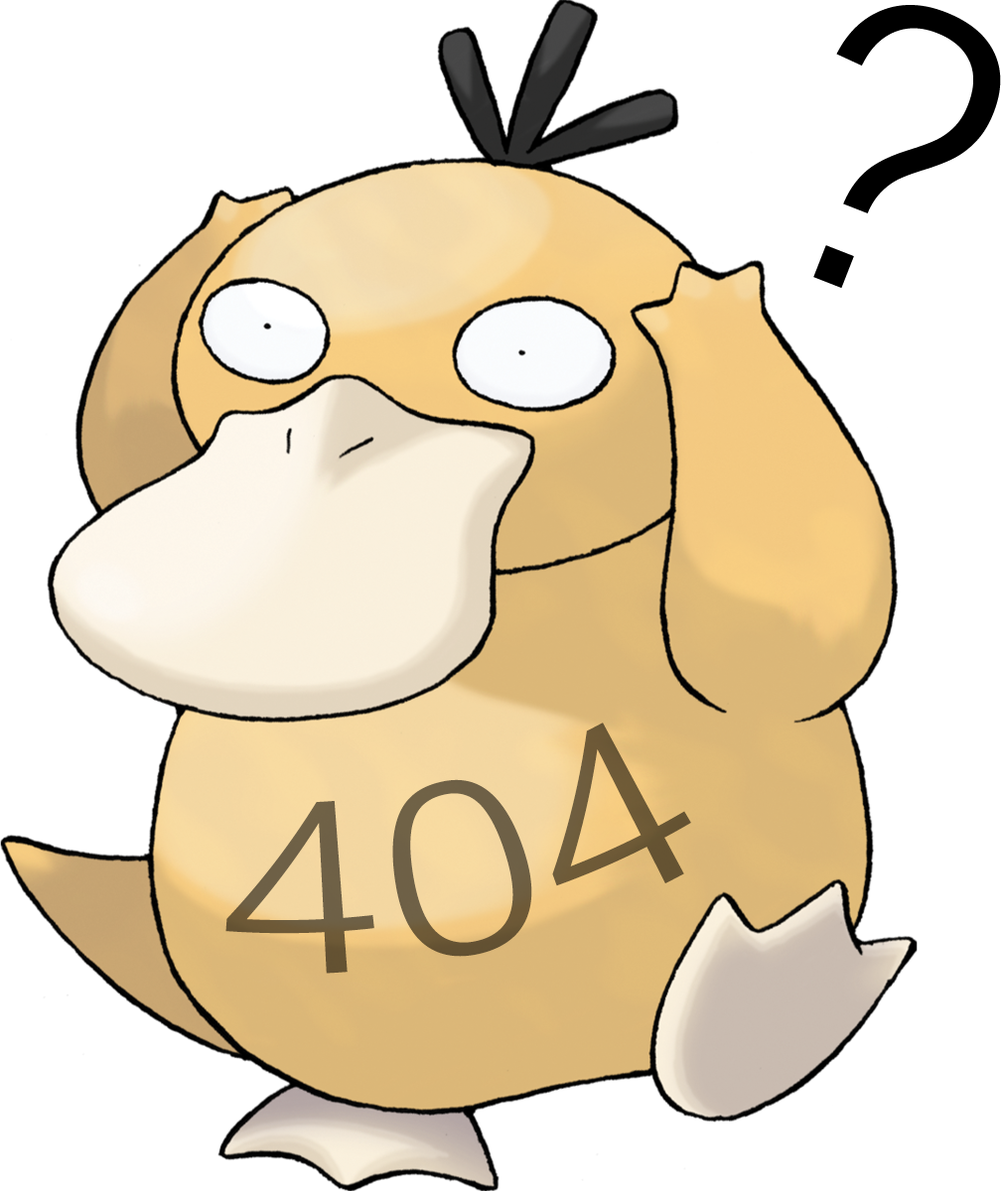
<style>
.page{position:relative;width:1001px;height:1191px;background:#ffffff}
.page>*{position:absolute;margin:0}
.t1{font:422.4px "DengXian";color:#000000}
.t2{font:248.2px "DengXian";color:#6e5d3e}
</style>
<div class="page">
<p class="t1" style="left:813px;top:5px;width:188px;height:283px;rotate:21deg">?</p>
<p class="t2" style="left:225px;top:723px;width:466px;height:251px;rotate:-13deg">404</p>
</div>
